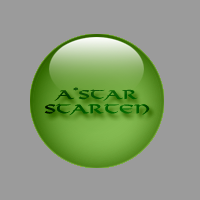
<style>
.page{position:relative;width:200px;height:200px;background:#9b9b9b}
.page>*{position:absolute;margin:0}
.t1{font:12px "Viking-Normal";color:#015501;scale:1.4 1}
</style>
<div class="page">
<p class="t1" style="left:44px;top:87px;width:106px;height:29px;text-align:center">A*Star<br>Starten</p>
</div>
